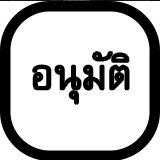
<style>
.page{position:relative;width:160px;height:160px;background:#ffffff}
.page>*{position:absolute;margin:0}
.t1{font:58.3px "FreesiaUPC";color:#000000}
</style>
<div class="page">
<p class="t1" style="left:33px;top:51px;width:96px;height:52px">อนุมัติ</p>
</div>
